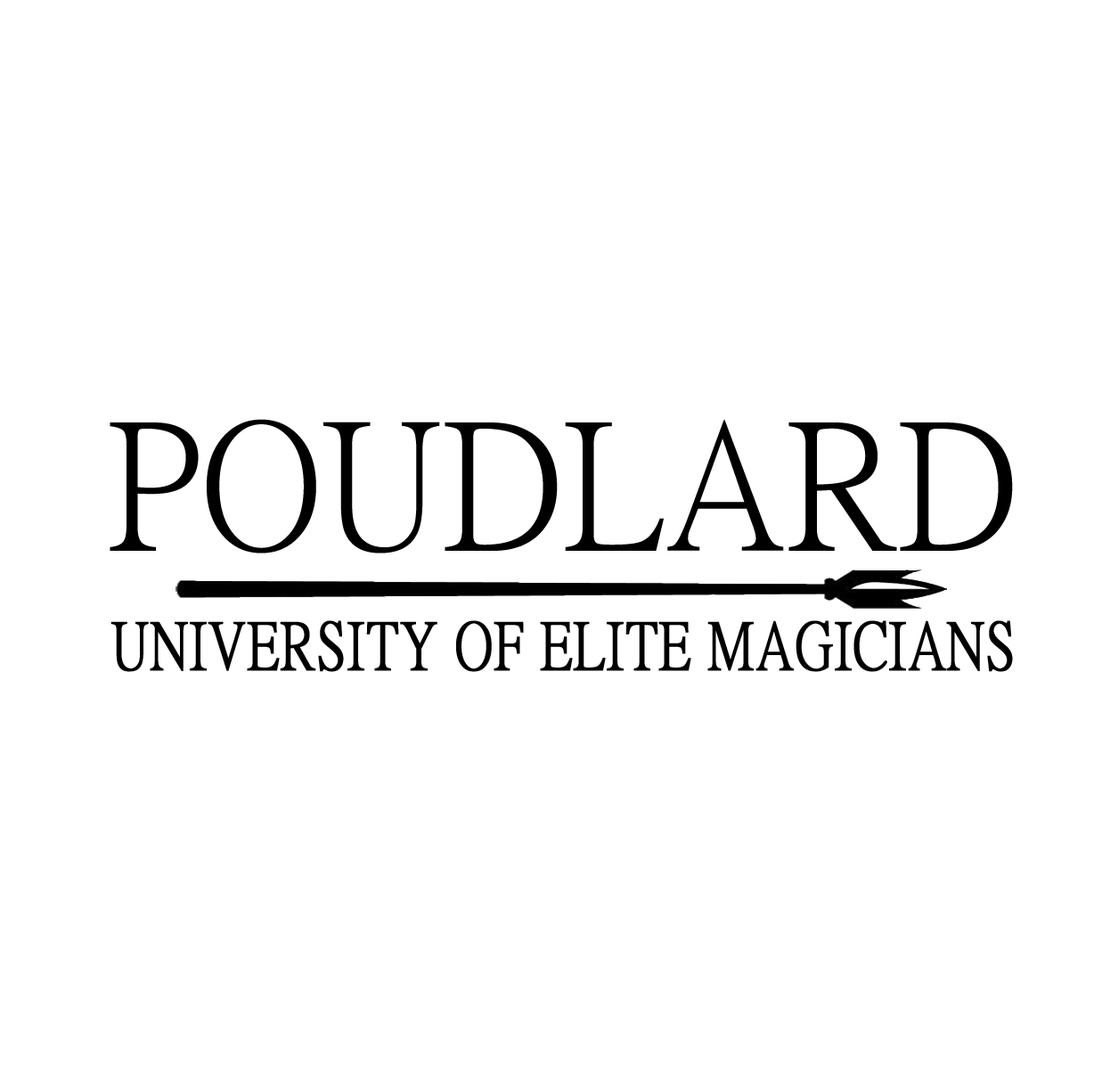
<style>
.page{position:relative;width:1094px;height:1090px;background:#ffffff}
.page>*{position:absolute;margin:0}
.t1{font:178.2px "PMingLiU-ExtB";color:#000000}
.t2{font:66.5px "PMingLiU-ExtB";color:#000000;font-weight:bold;scale:0.83 1}
</style>
<div class="page">
<p class="t1" style="left:110px;top:419px;width:903px;height:134px">POUDLARD</p>
<p class="t2" style="left:110px;top:620px;width:903px;height:52px">UNIVERSITY OF ELITE MAGICIANS</p>
</div>
